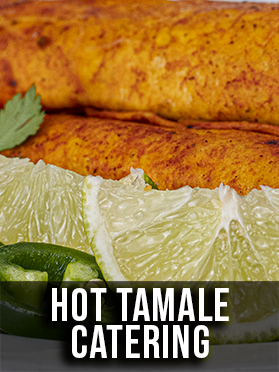
<style>
.page{position:relative;width:279px;height:372px}
.page>*{position:absolute;margin:0}
.t1{font:45.8px/37.5px "BebasNeue-Regular";letter-spacing:0.025em;color:#ffffff}
</style>
<div class="page">
<p class="t1" style="left:52px;top:288px;width:177px;height:70px;text-align:center">Hot tamale<br>catering</p>
</div>
